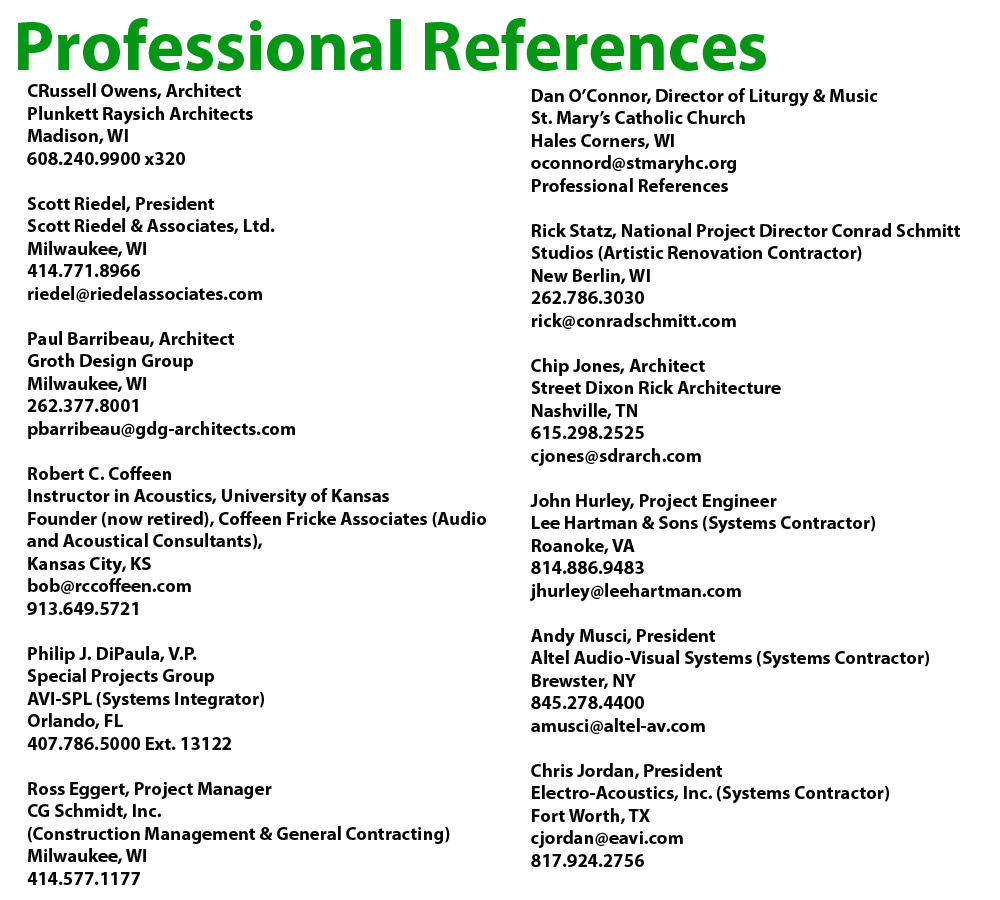
<style>
.page{position:relative;width:1000px;height:900px;background:#ffffff}
.page>*{position:absolute;margin:0}
.t1{font:71.5px "MyriadPro-Bold";color:#049715}
.t2{font:18.8px "MyriadPro-Bold";color:#030303}
</style>
<div class="page">
<p class="t1" style="left:18px;top:18px;width:748px;height:53px">Professional References</p>
<p class="t2" style="left:27px;top:83px;width:459px;height:802px">CRussell Owens, Architect<br>Plunkett Raysich Architects<br>Madison, WI<br>608.240.9900 x320<br><br>Scott Riedel, President<br>Scott Riedel &amp; Associates, Ltd.<br>Milwaukee, WI<br>414.771.8966<br>riedel@riedelassociates.com<br><br>Paul Barribeau, Architect<br>Groth Design Group<br>Milwaukee, WI<br>262.377.8001<br>pbarribeau@gdg-architects.com<br><br>Robert C. Coffeen<br>Instructor in Acoustics, University of Kansas<br>Founder (now retired), Coffeen Fricke Associates (Audio and Acoustical Consultants), <br>Kansas City, KS<br>bob@rccoffeen.com<br>913.649.5721<br><br>​Philip J. DiPaula, V.P. <br>Special Projects Group<br>AVI-SPL (Systems Integrator)<br>Orlando, FL<br>407.786.5000 Ext. 13122<br><br>Ross Eggert, Project Manager<br>CG Schmidt, Inc. <br>(Construction Management &amp; General Contracting)<br>Milwaukee, WI<br>414.577.1177<br>ross.eggert@cgschmidt.com</p>
<p class="t2" style="left:530px;top:88px;width:430px;height:779px">Dan O’Connor, Director of Liturgy &amp; Music<br>St. Mary’s Catholic Church<br>Hales Corners, WI<br>​oconnord@stmaryhc.org<br>Professional References<br>​<br>Rick Statz, National Project Director Conrad Schmitt Studios (Artistic Renovation Contractor)<br>New Berlin, WI<br>262.786.3030<br>rick@conradschmitt.com<br><br>Chip Jones, Architect<br>Street Dixon Rick Architecture<br>Nashville, TN<br>615.298.2525<br>​cjones@sdrarch.com<br><br>John Hurley, Project Engineer<br>Lee Hartman &amp; Sons (Systems Contractor)<br>Roanoke, VA<br>814.886.9483<br>jhurley@leehartman.com<br><br>Andy Musci, President<br>Altel Audio-Visual Systems (Systems Contractor)<br>Brewster, NY<br>845.278.4400<br>amusci@altel-av.com<br><br>Chris Jordan, President<br>Electro-Acoustics, Inc. (Systems Contractor)<br>Fort Worth, TX<br>cjordan@eavi.com<br>​817.924.2756</p>
</div>
